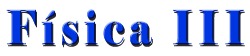
<style>
.page{position:relative;width:250px;height:56px;background:#ffffff}
.page>*{position:absolute;margin:0}
.t1{font:47.1px "Elephant-Regular";letter-spacing:0.14em;scale:0.82 1}
</style>
<div class="page">
<p class="t1" style="left:6px;top:9px;width:238px;height:37px">Física III</p>
</div>
